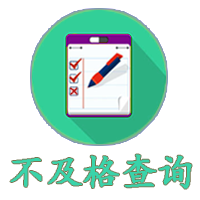
<style>
.page{position:relative;width:200px;height:200px;background:#ffffff}
.page>*{position:absolute;margin:0}
.t1{font:37.5px "¿¬Ìå";color:#39d4aa;font-weight:bold}
</style>
<div class="page">
<p class="t1" style="left:10px;top:154px;width:182px;height:35px">不及格查询</p>
</div>
